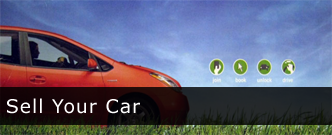
<style>
.page{position:relative;width:332px;height:135px}
.page>*{position:absolute;margin:0}
.t1{font:19px "Verdana";letter-spacing:0.05em;color:#ffffff}
</style>
<div class="page">
<p class="t1" style="left:7px;top:98px;width:133px;height:16px">Sell Your Car</p>
</div>
